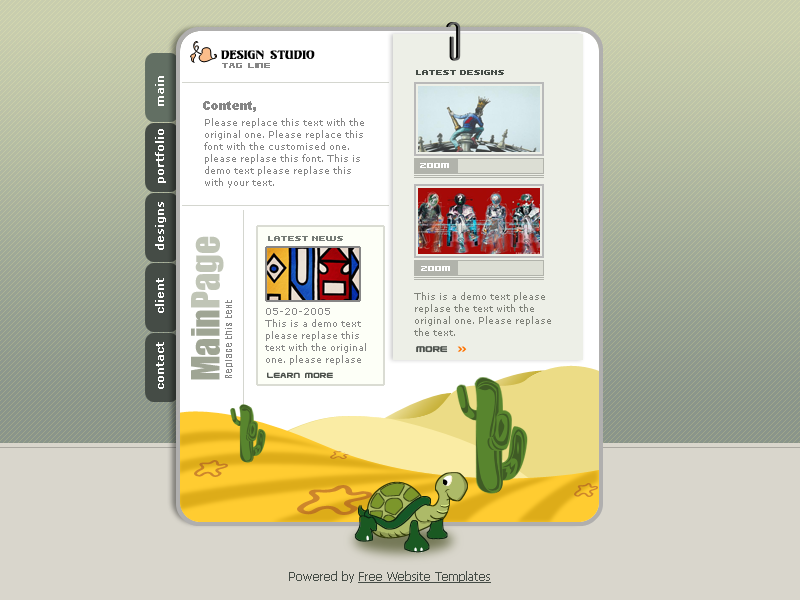
<style>
.page{position:relative;width:800px;height:600px}
.page>*{position:absolute;margin:0}
.t1{font:12px "Unicorn";color:#000000}
.t2{font:9px "Usuzi";color:#858585}
.t3{font:11px "Verdana";color:#ffffff;font-weight:bold}
.t4{font:8px "Kroeger0563";color:#454c46;text-transform:uppercase}
.t5{font:12px "Arial-Black";color:#868686}
.t6{font:9px/12px "Verdana";color:#868686}
.t7{font:9px "Usuzi";color:#ffffff}
.t8{font:36px "Impact";color:#9fa594}
.t9{font:36px "Impact";color:#c0c5b6}
.t10{font:8px "Kroeger0563";color:#757b76;text-transform:uppercase}
.t11{font:9px/12px "Verdana";color:#80827a}
.t12{font:9px "Impact";letter-spacing:0.1em;color:#868686}
.t13{font:9px/12px "Verdana";color:#878787}
.t14{font:9px "Usuzi";color:#4c514c}
.t15{font:12px "Tahoma";color:#454c46;text-decoration:underline}
.t16{font:12px "Tahoma";color:#454c46}
</style>
<div class="page">
<p class="t1" style="left:221px;top:50px;width:94px;height:9px">DESIGN STUDIO</p>
<p class="t2" style="left:222px;top:63px;width:48px;height:5px">tag line</p>
<p class="t3" style="left:155px;top:76px;width:9px;height:30px;rotate:-90deg">main</p>
<p class="t4" style="left:416px;top:70px;width:88px;height:5px">latest designs</p>
<p class="t5" style="left:203px;top:101px;width:53px;height:11px">Content,</p>
<p class="t6" style="left:204px;top:118px;width:160px;height:70px">Please replace this text with the original one. Please replace this font with the customised one. please replase this font. This is demo text please replase this with your text.</p>
<p class="t3" style="left:155px;top:129px;width:11px;height:54px;rotate:-90deg">portfolio</p>
<p class="t7" style="left:420px;top:163px;width:29px;height:5px">zoom</p>
<p class="t3" style="left:155px;top:202px;width:11px;height:48px;rotate:-90deg">designs</p>
<p class="t8" style="left:191px;top:236px;width:33px;height:144px;rotate:-90deg">Main<span class="t9">Page</span></p>
<p class="t10" style="left:268px;top:236px;width:75px;height:5px">latest news</p>
<p class="t7" style="left:421px;top:266px;width:29px;height:5px">zoom</p>
<p class="t3" style="left:155px;top:278px;width:9px;height:35px;rotate:-90deg">client</p>
<p class="t11" style="left:414px;top:292px;width:137px;height:44px">This is a demo text please replase the text with the original one. Please replase the text.</p>
<p class="t12" style="left:225px;top:300px;width:8px;height:78px;rotate:-90deg">Replace this text</p>
<p class="t13" style="left:265px;top:308px;width:101px;height:57px">05-20-2005<br>This is a demo text please replase this text with the original one. please replase this text.</p>
<p class="t3" style="left:156px;top:342px;width:8px;height:47px;rotate:-90deg">contact</p>
<p class="t14" style="left:267px;top:372px;width:66px;height:6px">learn more</p>
<p class="t15" style="left:289px;top:571px;width:202px;height:12px"><span class="t16">Powered by </span>Free Website Templates</p>
</div>
